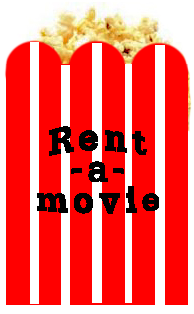
<style>
.page{position:relative;width:194px;height:314px;background:#ff0000}
.page>*{position:absolute;margin:0}
.t1{font:48px/24px "DilleniaUPCBold";letter-spacing:0.075em;color:#000000;scale:1.26 1}
</style>
<div class="page">
<p class="t1" style="left:37px;top:126px;width:122px;height:88px;text-align:center">Rent<br>-a-<br>movie</p>
</div>
